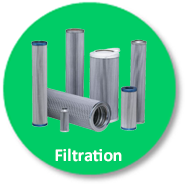
<style>
.page{position:relative;width:185px;height:185px;background:#00cc66}
.page>*{position:absolute;margin:0}
.t1{font:18px "Calibri-Bold";color:#ffffff}
</style>
<div class="page">
<p class="t1" style="left:55px;top:148px;width:67px;height:14px">Filtration</p>
</div>
